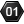
<style>
.page{position:relative;width:24px;height:24px;background:#ffffff}
.page>*{position:absolute;margin:0}
.t1{font:12px "ArialMT";color:#ffffff}
</style>
<div class="page">
<p class="t1" style="left:6px;top:7px;width:12px;height:9px">01</p>
</div>
